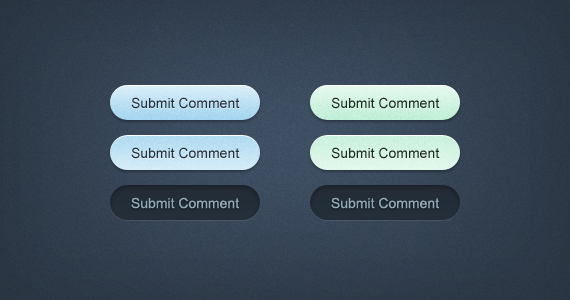
<style>
.page{position:relative;width:570px;height:300px}
.page>*{position:absolute;margin:0}
.t1{font:14px "ArialMT";color:#2c3745}
.t2{font:14px "ArialMT";color:#213424}
.t3{font:14px "ArialMT";color:#213525}
.t4{font:14px "ArialMT";color:#92aab7}
</style>
<div class="page">
<p class="t1" style="left:131px;top:97px;width:109px;height:12px">Submit Comment</p>
<p class="t2" style="left:331px;top:97px;width:109px;height:12px">Submit Comment</p>
<p class="t1" style="left:131px;top:147px;width:109px;height:12px">Submit Comment</p>
<p class="t3" style="left:331px;top:147px;width:109px;height:12px">Submit Comment</p>
<p class="t4" style="left:131px;top:197px;width:108px;height:12px">Submit Comment</p>
<p class="t4" style="left:331px;top:197px;width:108px;height:12px">Submit Comment</p>
</div>
